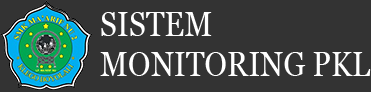
<style>
.page{position:relative;width:371px;height:92px;background:#333333}
.page>*{position:absolute;margin:0}
.t1{font:33.8px "Georgia";color:#ffffff;scale:0.9 1}
</style>
<div class="page">
<p class="t1" style="left:100px;top:12px;width:271px;height:64px">SISTEM<br>MONITORING PKL</p>
</div>
